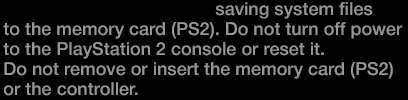
<style>
.page{position:relative;width:408px;height:100px;background:#000000}
.page>*{position:absolute;margin:0}
.t1{font:18px/20px "HelveticaNeue-Medium";color:#969696}
.t2{font:18px/20px "HelveticaNeue-Bold";color:#969696}
</style>
<div class="page">
<p class="t1" style="left:3px;top:2px;width:400px;height:94px"><span class="t2">MEMORY CARD SLOT 1 </span>saving system files<br>to the memory card (PS2). Do not turn off power<br>to the PlayStation 2 console or reset it.<br>Do not remove or insert the memory card (PS2)<br>or the controller.</p>
</div>
